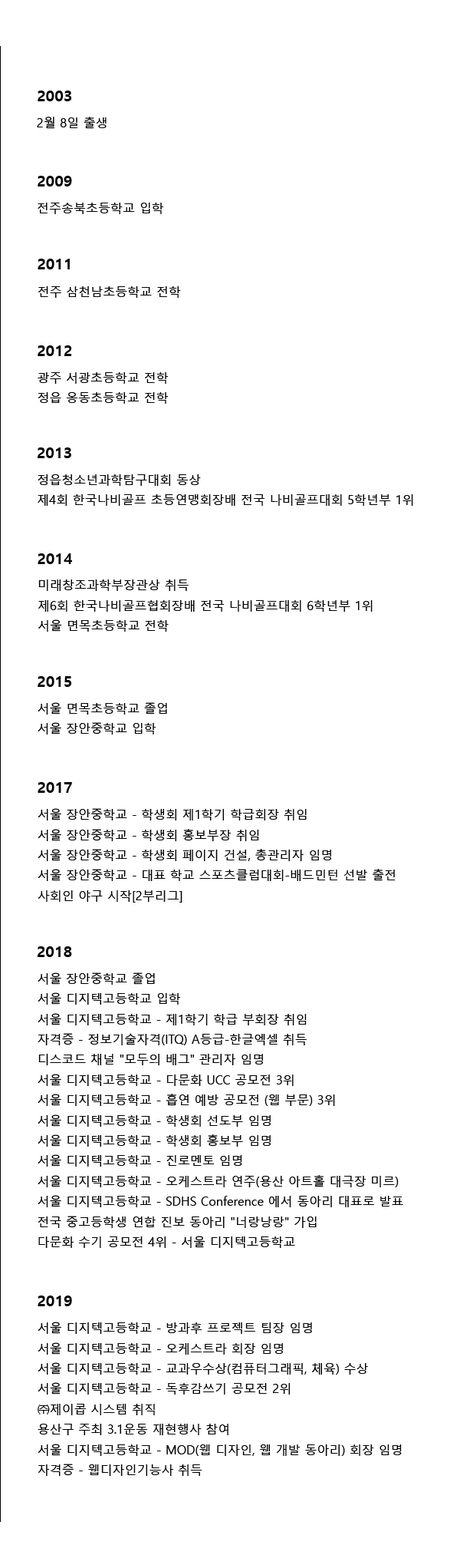
<style>
.page{position:relative;width:460px;height:1568px;background:#ffffff}
.page>*{position:absolute;margin:0}
.t1{font:15.3px "MalgunGothicBold";color:#000000}
.t2{font:12.3px "MalgunGothic";color:#000000}
</style>
<div class="page">
<p class="t1" style="left:38px;top:91px;width:34px;height:10px">2003</p>
<p class="t2" style="left:37px;top:117px;width:70px;height:12px">2월 8일 출생</p>
<p class="t1" style="left:38px;top:176px;width:34px;height:11px">2009</p>
<p class="t2" style="left:38px;top:203px;width:125px;height:11px">전주송북초등학교 입학</p>
<p class="t1" style="left:38px;top:259px;width:32px;height:10px">2011</p>
<p class="t2" style="left:38px;top:286px;width:143px;height:12px">전주 삼천남초등학교 전학</p>
<p class="t1" style="left:38px;top:345px;width:34px;height:11px">2012</p>
<p class="t2" style="left:38px;top:372px;width:130px;height:32px">광주 서광초등학교 전학<br><br>정읍 옹동초등학교 전학</p>
<p class="t1" style="left:38px;top:447px;width:33px;height:11px">2013</p>
<p class="t2" style="left:38px;top:474px;width:376px;height:32px">정읍청소년과학탐구대회 동상<br><br>제4회 한국나비골프 초등연맹회장배 전국 나비골프대회 5학년부 1위</p>
<p class="t1" style="left:38px;top:553px;width:34px;height:11px">2014</p>
<p class="t2" style="left:38px;top:579px;width:335px;height:53px">미래창조과학부장관상 취득<br><br>제6회 한국나비골프협회장배 전국 나비골프대회 6학년부 1위<br><br>서울 면목초등학교 전학</p>
<p class="t1" style="left:38px;top:676px;width:33px;height:11px">2015</p>
<p class="t2" style="left:38px;top:702px;width:129px;height:32px">서울 면목초등학교 졸업<br><br>서울 장안중학교 입학</p>
<p class="t1" style="left:38px;top:782px;width:34px;height:11px">2017</p>
<p class="t2" style="left:38px;top:808px;width:358px;height:95px">서울 장안중학교 - 학생회 제1학기 학급회장 취임<br><br>서울 장안중학교 - 학생회 홍보부장 취임<br><br>서울 장안중학교 - 학생회 페이지 건설, 총관리자 임명<br><br>서울 장안중학교 - 대표 학교 스포츠클럽대회-배드민턴 선발 출전<br><br>사회인 야구 시작[2부리그]</p>
<p class="t1" style="left:38px;top:946px;width:34px;height:11px">2018</p>
<p class="t2" style="left:38px;top:972px;width:366px;height:276px">서울 장안중학교 졸업<br><br>서울 디지텍고등학교 입학<br><br>서울 디지텍고등학교 - 제1학기 학급 부회장 취임<br><br>자격증 - 정보기술자격(ITQ) A등급-한글엑셀 취득<br><br>디스코드 채널 "모두의 배그" 관리자 임명<br><br>서울 디지텍고등학교 - 다문화 UCC 공모전 3위<br><br>서울 디지텍고등학교 - 흡연 예방 공모전 (웹 부문) 3위<br><br>서울 디지텍고등학교 - 학생회 선도부 임명<br><br>서울 디지텍고등학교 - 학생회 홍보부 임명<br><br>서울 디지텍고등학교 - 진로멘토 임명<br><br>서울 디지텍고등학교 - 오케스트라 연주(용산 아트홀 대극장 미르)<br><br>서울 디지텍고등학교 - SDHS Conference 에서 동아리 대표로 발표<br><br>전국 중고등학생 연합 진보 동아리 "너랑낭랑" 가입<br><br>다문화 수기 공모전 4위 - 서울 디지텍고등학교</p>
<p class="t1" style="left:38px;top:1296px;width:34px;height:10px">2019</p>
<p class="t2" style="left:38px;top:1322px;width:364px;height:154px">서울 디지텍고등학교 - 방과후 프로젝트 팀장 임명<br><br>서울 디지텍고등학교 - 오케스트라 회장 임명<br><br>서울 디지텍고등학교 - 교과우수상(컴퓨터그래픽, 체육) 수상<br><br>서울 디지텍고등학교 - 독후감쓰기 공모전 2위<br><br>㈜제이콥 시스템 취직<br><br>용산구 주최 3.1운동 재현행사 참여<br><br>서울 디지텍고등학교 - MOD(웹 디자인, 웹 개발 동아리) 회장 임명<br><br>자격증 - 웹디자인기능사 취득</p>
</div>
